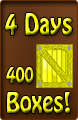
<style>
.page{position:relative;width:78px;height:120px}
.page>*{position:absolute;margin:0}
.t1{font:26.4px "HoboStd";scale:0.83 1}
.t2{font:25.2px "HoboStd";scale:0.83 1}
.t3{font:19.2px "HoboStd";scale:0.83 1}
</style>
<div class="page">
<p class="t1" style="left:5px;top:13px;width:67px;height:22px">4 Days</p>
<p class="t2" style="left:6px;top:67px;width:64px;height:46px"><span class="t3">400 <br></span>Boxes!</p>
</div>
